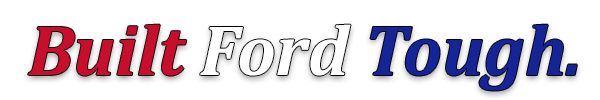
<style>
.page{position:relative;width:600px;height:100px;background:#ffffff}
.page>*{position:absolute;margin:0}
.t1{font:72px "Cambria-BoldItalic";color:#152598}
.t2{font:72px "Cambria-BoldItalic";color:#c90e2d}
.t3{font:72px "Cambria-BoldItalic";color:#ffffff}
</style>
<div class="page">
<p class="t1" style="left:28px;top:24px;width:549px;height:67px"><span class="t2">Built </span><span class="t3">Ford </span>Tough.</p>
</div>
